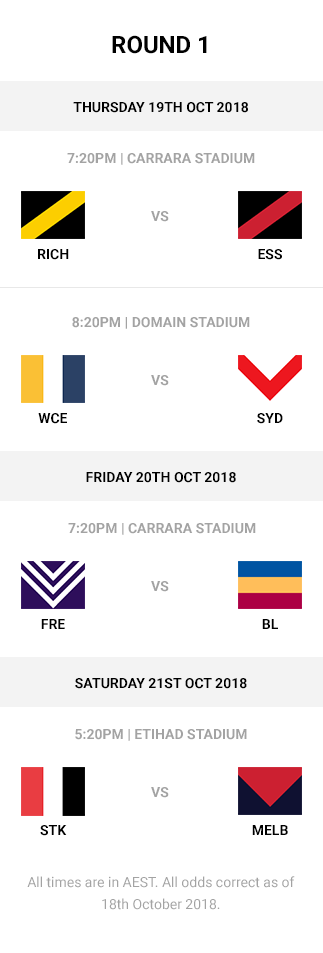
<style>
.page{position:relative;width:323px;height:953px;background:#ffffff}
.page>*{position:absolute;margin:0}
.t1{font:24px "Roboto-Bold";color:#000000}
.t2{font:14px "Roboto-Bold";color:#000000}
.t3{font:14px "Roboto-Bold";color:#a3a3a3}
.t4{font:14px/22px "Roboto-Regular";color:#a3a3a3}
</style>
<div class="page">
<p class="t1" style="left:112px;top:35px;width:95px;height:19px">ROUND 1</p>
<p class="t2" style="left:73px;top:102px;width:175px;height:11px">THURSDAY 19TH OCT 2018</p>
<p class="t3" style="left:67px;top:153px;width:188px;height:12px">7:20PM | CARRARA STADIUM</p>
<p class="t3" style="left:151px;top:211px;width:18px;height:11px">VS</p>
<p class="t2" style="left:38px;top:249px;width:31px;height:11px">RICH</p>
<p class="t2" style="left:258px;top:249px;width:24px;height:11px">ESS</p>
<p class="t3" style="left:72px;top:317px;width:178px;height:12px">8:20PM | DOMAIN STADIUM</p>
<p class="t3" style="left:151px;top:375px;width:18px;height:11px">VS</p>
<p class="t2" style="left:38px;top:413px;width:29px;height:11px">WCE</p>
<p class="t2" style="left:257px;top:413px;width:26px;height:11px">SYD</p>
<p class="t2" style="left:86px;top:472px;width:150px;height:11px">FRIDAY 20TH OCT 2018</p>
<p class="t3" style="left:68px;top:523px;width:188px;height:12px">7:20PM | CARRARA STADIUM</p>
<p class="t3" style="left:151px;top:581px;width:18px;height:11px">VS</p>
<p class="t2" style="left:41px;top:619px;width:24px;height:10px">FRE</p>
<p class="t2" style="left:262px;top:619px;width:16px;height:10px">BL</p>
<p class="t2" style="left:75px;top:678px;width:172px;height:11px">SATURDAY 21ST OCT 2018</p>
<p class="t3" style="left:75px;top:729px;width:172px;height:12px">5:20PM | ETIHAD STADIUM</p>
<p class="t3" style="left:151px;top:787px;width:18px;height:11px">VS</p>
<p class="t2" style="left:40px;top:825px;width:27px;height:11px">STK</p>
<p class="t2" style="left:252px;top:825px;width:36px;height:10px">MELB</p>
<p class="t4" style="left:27px;top:876px;width:268px;height:34px;text-align:center">All times are in AEST. All odds correct as of 18th October 2018.</p>
</div>
